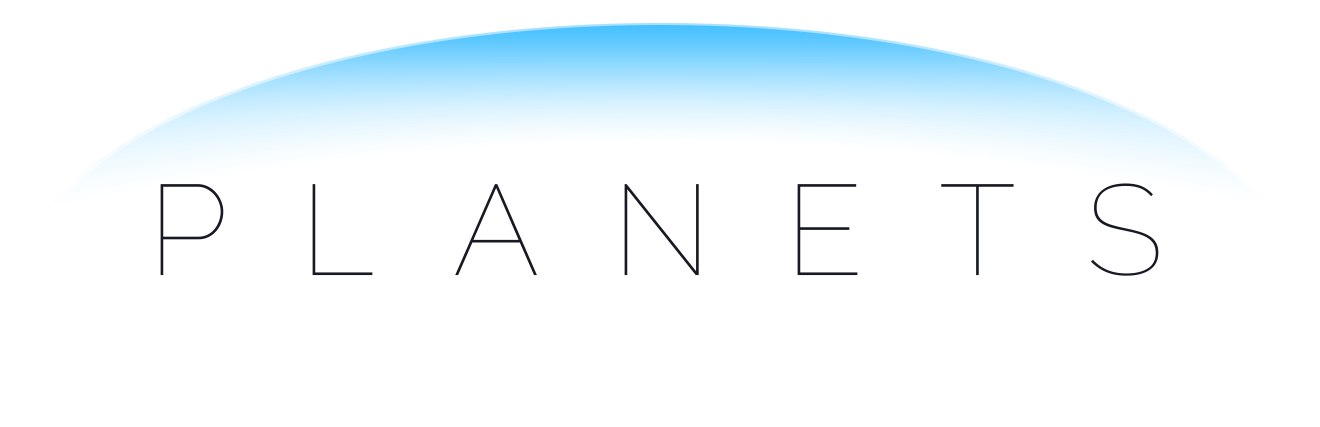
<style>
.page{position:relative;width:1320px;height:427px;background:#ffffff}
.page>*{position:absolute;margin:0}
.t1{font:128px "Raleway-Thin";letter-spacing:0.6em;color:#171923}
</style>
<div class="page">
<p class="t1" style="left:160px;top:183px;width:999px;height:93px">PLANETS</p>
</div>
